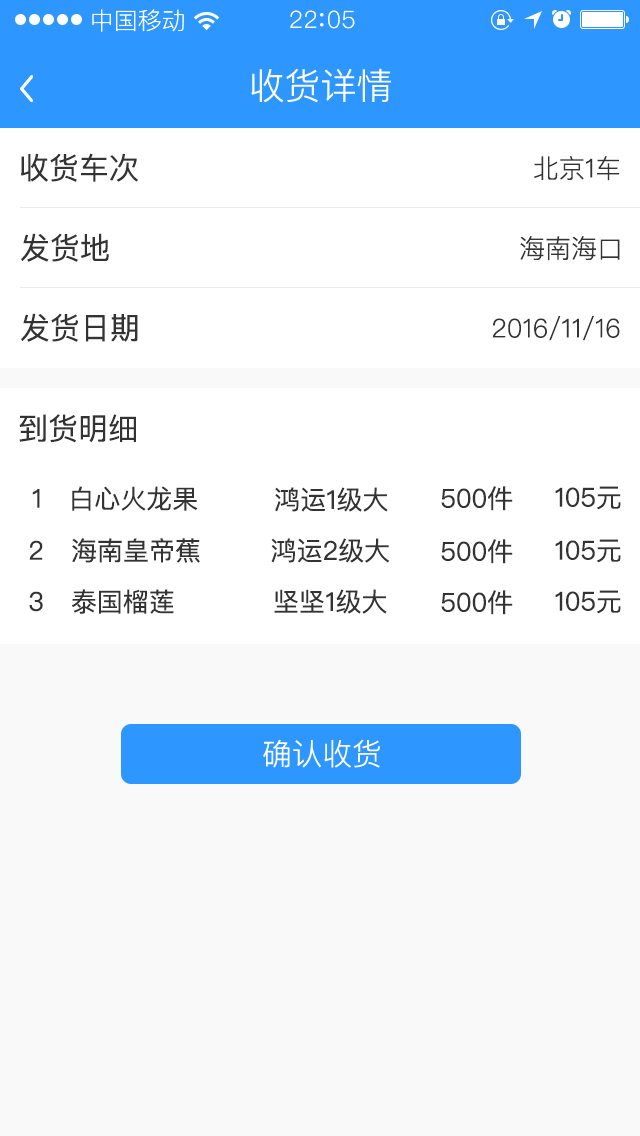
<style>
.page{position:relative;width:640px;height:1136px;background:#f9f9f9}
.page>*{position:absolute;margin:0}
.t1{font:24px "PingFang-SC-Regular";color:#ffffff}
.t2{font:36px "PingFang-SC-Regular";color:#ffffff}
.t3{font:30px "PingFangSC-Regular";color:#333333}
.t4{font:26px "PingFangSC-Light";color:#333333}
.t5{font:26px "PingFangSC-Regular";color:#333333}
.t6{font:30px "PingFang-SC-Regular";color:#ffffff}
</style>
<div class="page">
<p class="t1" style="left:92px;top:9px;width:92px;height:23px">中国移动</p>
<p class="t2" style="left:251px;top:68px;width:140px;height:35px">收货详情</p>
<p class="t3" style="left:21px;top:153px;width:117px;height:29px">收货车次</p>
<p class="t4" style="left:534px;top:156px;width:86px;height:25px">北京1车</p>
<p class="t3" style="left:21px;top:233px;width:88px;height:29px">发货地</p>
<p class="t4" style="left:520px;top:236px;width:100px;height:25px">海南海口</p>
<p class="t3" style="left:21px;top:313px;width:117px;height:29px">发货日期</p>
<p class="t4" style="left:492px;top:316px;width:128px;height:25px">2016/11/16</p>
<p class="t3" style="left:19px;top:414px;width:117px;height:29px">到货明细</p>
<p class="t5" style="left:72px;top:486px;width:126px;height:25px">白心火龙果</p>
<p class="t5" style="left:441px;top:486px;width:72px;height:25px">500件</p>
<p class="t5" style="left:555px;top:486px;width:66px;height:24px">105元</p>
<p class="t5" style="left:32px;top:489px;width:8px;height:19px">1</p>
<p class="t5" style="left:275px;top:487px;width:113px;height:25px">鸿运1级大</p>
<p class="t5" style="left:29px;top:540px;width:14px;height:20px">2</p>
<p class="t5" style="left:72px;top:538px;width:128px;height:25px">海南皇帝蕉</p>
<p class="t5" style="left:271px;top:538px;width:119px;height:25px">鸿运2级大</p>
<p class="t5" style="left:441px;top:539px;width:72px;height:25px">500件</p>
<p class="t5" style="left:555px;top:539px;width:66px;height:24px">105元</p>
<p class="t5" style="left:29px;top:591px;width:14px;height:21px">3</p>
<p class="t5" style="left:72px;top:589px;width:102px;height:25px">泰国榴莲</p>
<p class="t5" style="left:274px;top:589px;width:113px;height:25px">坚坚1级大</p>
<p class="t5" style="left:441px;top:590px;width:72px;height:25px">500件</p>
<p class="t5" style="left:555px;top:590px;width:66px;height:24px">105元</p>
<p class="t6" style="left:263px;top:739px;width:117px;height:29px">确认收货</p>
</div>
